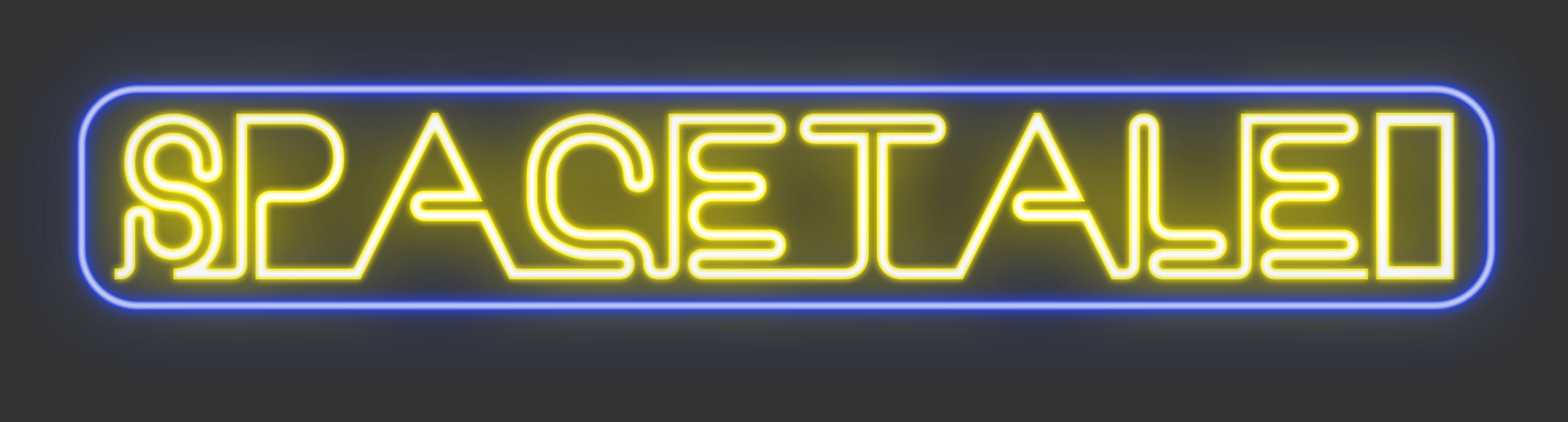
<style>
.page{position:relative;width:1568px;height:422px}
.page>*{position:absolute;margin:0}
.t1{font:207.4px "Neon";letter-spacing:-0.025em}
</style>
<div class="page">
<p class="t1" style="left:114px;top:113px;width:1340px;height:167px">SpaceTale!</p>
</div>
